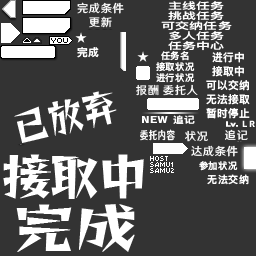
<style>
.page{position:relative;width:256px;height:256px;background:#333333}
.page>*{position:absolute;margin:0}
.t1{font:11.3px "HYWenHei-FEW";letter-spacing:0.045em;color:#ffffff}
.t2{font:9.3px/10px "DFKingGothicSC14-Semibold";letter-spacing:0.005em;color:#ffffff;scale:1.5 1}
.t3{font:10.7px "DFKingGothicSC14-Semibold";letter-spacing:0.045em;color:#ffffff}
.t4{font:9.3px/10.7px "DFKingGothicSC14-Semibold";letter-spacing:0.045em;color:#ffffff}
.t5{font:10.7px/13.3px "DFKingGothicSC14-Semibold";letter-spacing:0.045em;color:#ffffff}
.t6{font:10.7px/14.7px "DFKingGothicSC14-Semibold";letter-spacing:0.045em;color:#ffffff}
.t7{font:38.7px "Tiejili";letter-spacing:0.005em;color:#ffffff;scale:0.92 1}
.t8{font:9.1px "DFKingGothicSC14-Semibold";letter-spacing:0.045em;color:#ffffff;scale:1.18 1}
.t9{font:11.3px "HYWenHei-FEW";letter-spacing:0.045em;color:#ffffff;scale:0.75 1}
.t10{font:49.3px "Tiejili";letter-spacing:-0.075em;color:#ffffff;scale:1.05 1}
.t11{font:8px/6px "DinkieBitmap-7pxDemo";letter-spacing:0.005em;color:#ffffff;scale:0.92 1}
.t12{font:9.3px "DFKingGothicSC14-Semibold";letter-spacing:0.045em;color:#ffffff}
.t13{font:10px "DFKingGothicSC14-Semibold";letter-spacing:0.045em;color:#ffffff}
.t14{font:53.3px "Tiejili";letter-spacing:-0.015em;color:#ffffff;scale:1.2 1}
</style>
<div class="page">
<p class="t1" style="left:77px;top:2px;width:47px;height:12px">完成条件</p>
<p class="t2" style="left:161px;top:1px;width:71px;height:50px;text-align:center">主线任务<br>挑战任务<br>可交纳任务<br>多人任务<br>任务中心</p>
<p class="t1" style="left:89px;top:16px;width:23px;height:12px">更新</p>
<p class="t3" style="left:77px;top:47px;width:22px;height:11px">完成</p>
<p class="t4" style="left:156px;top:51px;width:39px;height:32px;text-align:center">任务名<br>接取状况<br>进行状况</p>
<p class="t5" style="left:206px;top:52px;width:44px;height:67px;text-align:center">进行中<br><span class="t6">接取中<br></span>可以交纳<br><span class="t6">无法接取<br></span>暂时停止</p>
<p class="t1" style="left:136px;top:84px;width:23px;height:12px">报酬</p>
<p class="t1" style="left:163px;top:84px;width:35px;height:12px">委托人</p>
<p class="t7" style="left:14px;top:91px;width:103px;height:52px;rotate:-13deg">已放弃</p>
<p class="t8" style="left:173px;top:115px;width:22px;height:9px">追记</p>
<p class="t9" style="left:140px;top:129px;width:35px;height:12px">委托内容</p>
<p class="t1" style="left:185px;top:130px;width:23px;height:12px">状况</p>
<p class="t1" style="left:225px;top:129px;width:23px;height:11px">追记</p>
<p class="t1" style="left:191px;top:145px;width:47px;height:12px">达成条件</p>
<p class="t10" style="left:3px;top:154px;width:141px;height:45px">接取中</p>
<p class="t11" style="left:150px;top:156px;width:24px;height:17px">HOST<br>SAMU1<br>SAMU2</p>
<p class="t12" style="left:199px;top:161px;width:39px;height:10px">参加状况</p>
<p class="t13" style="left:207px;top:174px;width:42px;height:11px">无法交纳</p>
<p class="t14" style="left:16px;top:204px;width:119px;height:48px">完成</p>
</div>
